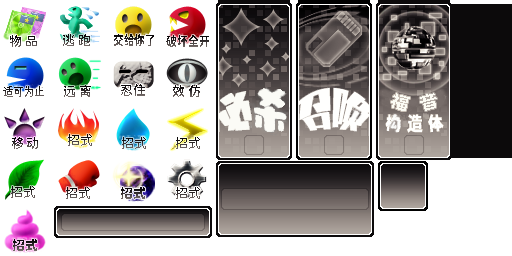
<style>
.page{position:relative;width:512px;height:256px;background:#ffffff}
.page>*{position:absolute;margin:0}
.t1{font:13px "JiangChengYuanTi-500W"}
.t2{font:13px "JiangChengYuanTi-600W";scale:0.82 1}
.t3{font:13px "JiangChengYuanTi-600W";scale:0.83 1}
.t4{font:11.9px "JiangChengYuanTi-500W";scale:0.86 1}
.t5{font:17.1px "JiangChengYuanTi-600W";color:#fbfbf4;scale:1.08 1}
.t6{font:18px "JiangChengYuanTi-600W";color:#fbfbf4;scale:1.08 1}
.t7{font:13px "jiangchengyuanti-400W"}
.t8{font:13px "JiangChengYuanTi-600W"}
</style>
<div class="page">
<p class="t1" style="left:10px;top:35px;width:27px;height:12px">物 品</p>
<p class="t1" style="left:63px;top:34px;width:27px;height:12px">逃 跑</p>
<p class="t2" style="left:114px;top:34px;width:40px;height:12px">交给你了</p>
<p class="t3" style="left:166px;top:35px;width:43px;height:12px">破坏全开</p>
<p class="t4" style="left:3px;top:86px;width:41px;height:11px">适可为止</p>
<p class="t1" style="left:64px;top:85px;width:27px;height:12px">远 离</p>
<p class="t1" style="left:121px;top:84px;width:24px;height:12px">忍住</p>
<p class="t1" style="left:173px;top:85px;width:27px;height:12px">效 仿</p>
<p class="t5" style="left:391px;top:93px;width:19px;height:18px;rotate:15deg">福</p>
<p class="t6" style="left:420px;top:93px;width:17px;height:18px;rotate:-15deg">音</p>
<p class="t1" style="left:12px;top:137px;width:26px;height:12px">移 动</p>
<p class="t7" style="left:68px;top:134px;width:24px;height:12px">招式</p>
<p class="t7" style="left:122px;top:137px;width:24px;height:12px">招式</p>
<p class="t7" style="left:176px;top:137px;width:24px;height:12px">招式</p>
<p class="t7" style="left:11px;top:186px;width:24px;height:12px">招式</p>
<p class="t7" style="left:66px;top:187px;width:24px;height:12px">招式</p>
<p class="t8" style="left:121px;top:187px;width:24px;height:12px">招式</p>
<p class="t7" style="left:176px;top:187px;width:24px;height:12px">招式</p>
<p class="t8" style="left:13px;top:239px;width:24px;height:12px">招式</p>
</div>
